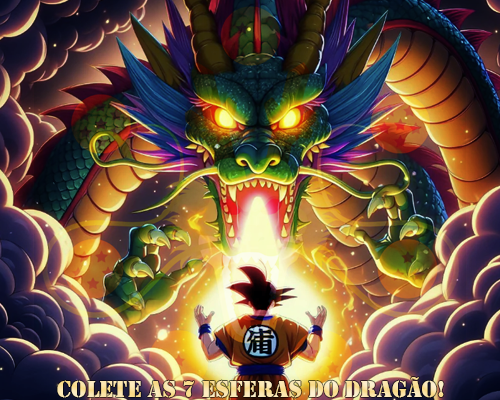
<style>
.page{position:relative;width:500px;height:400px}
.page>*{position:absolute;margin:0}
.t1{font:24px "Stencil"}
</style>
<div class="page">
<p class="t1" style="left:57px;top:377px;width:387px;height:21px">Colete as 7 esferas do dragão!</p>
</div>
